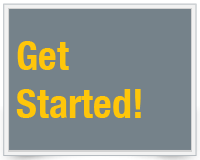
<style>
.page{position:relative;width:200px;height:160px;background:#75828a}
.page>*{position:absolute;margin:0}
.t1{font:40px "HelveticaNeue-CondensedBold";color:#ffc60a}
</style>
<div class="page">
<p class="t1" style="left:16px;top:41px;width:125px;height:77px">Get<br>Started!</p>
</div>
